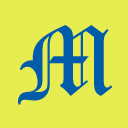
<style>
.page{position:relative;width:128px;height:128px;background:#e7ed51}
.page>*{position:absolute;margin:0}
.t1{font:96px "OldEnglishTextMT";color:#005baa}
</style>
<div class="page">
<p class="t1" style="left:18px;top:25px;width:95px;height:80px">M</p>
</div>
